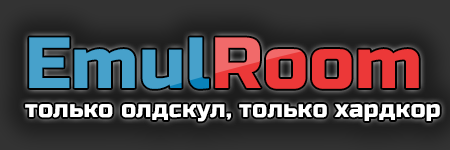
<style>
.page{position:relative;width:450px;height:150px}
.page>*{position:absolute;margin:0}
.t1{font:24px "RussoOne-Regular";letter-spacing:0.01em}
.t2{font:72px "RussoOne-Regular";letter-spacing:0.01em}
</style>
<div class="page">
<p class="t1" style="left:25px;top:37px;width:415px;height:85px"><span class="t2">Emul</span><span class="t2">Room </span>только олдскул, только хардкор</p>
</div>
